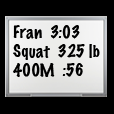
<style>
.page{position:relative;width:114px;height:114px;background:#000000}
.page>*{position:absolute;margin:0}
.t1{font:16px "MarkerFelt-Thin";color:#000000}
</style>
<div class="page">
<p class="t1" style="left:13px;top:25px;width:87px;height:52px">Fran  3:03<br>Squat  325 lb<br>400M  :56</p>
</div>
